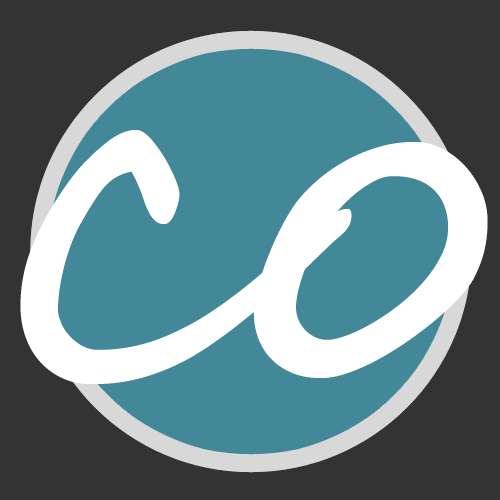
<style>
.page{position:relative;width:500px;height:500px;background:#438898}
.page>*{position:absolute;margin:0}
.t1{font:500px "SegoeScript";letter-spacing:-0.06em;color:#ffffff;scale:1.03 1}
</style>
<div class="page">
<p class="t1" style="left:20px;top:130px;width:468px;height:254px">co</p>
</div>
